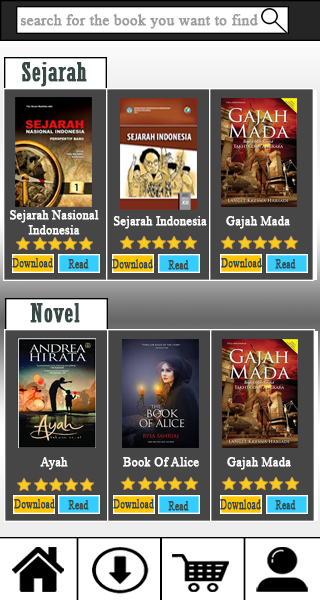
<style>
.page{position:relative;width:320px;height:600px;background:#464646}
.page>*{position:absolute;margin:0}
.t1{font:15.3px "TimesNewRomanPSMT";color:#9e9d9d;font-weight:bold}
.t2{font:26.3px "Rockwell-Condensed";color:#384844;font-weight:bold}
.t3{font:12.3px "TimesNewRomanPSMT";color:#fefefe;font-weight:bold}
.t4{font:11.6px "TimesNewRomanPSMT";color:#384844;font-weight:bold;scale:0.8 1}
.t5{font:12.8px "TimesNewRomanPSMT";color:#384844;font-weight:bold;scale:0.72 1}
.t6{font:13.4px "TimesNewRomanPSMT";color:#384844;font-weight:bold;scale:0.69 1}
.t7{font:11.9px "TimesNewRomanPSMT";color:#384844;font-weight:bold;scale:0.78 1}
.t8{font:13.7px "TimesNewRomanPSMT";color:#384844;font-weight:bold;scale:0.67 1}
</style>
<div class="page">
<p class="t1" style="left:20px;top:14px;width:238px;height:15px">search for the book you want to find</p>
<p class="t2" style="left:22px;top:62px;width:65px;height:25px">Sejarah</p>
<p class="t3" style="left:10px;top:210px;width:89px;height:25px;text-align:center">Sejarah Nasional<br>Indonesia</p>
<p class="t3" style="left:113px;top:216px;width:94px;height:13px">Sejarah Indonesia</p>
<p class="t3" style="left:226px;top:216px;width:64px;height:13px">Gajah Mada</p>
<p class="t4" style="left:12px;top:258px;width:41px;height:10px">Download</p>
<p class="t4" style="left:68px;top:259px;width:21px;height:10px">Read</p>
<p class="t5" style="left:112px;top:259px;width:41px;height:10px">Download</p>
<p class="t4" style="left:168px;top:260px;width:21px;height:10px">Read</p>
<p class="t6" style="left:221px;top:258px;width:41px;height:10px">Download</p>
<p class="t4" style="left:275px;top:259px;width:21px;height:10px">Read</p>
<p class="t2" style="left:30px;top:303px;width:50px;height:20px">Novel</p>
<p class="t3" style="left:40px;top:457px;width:28px;height:13px">Ayah</p>
<p class="t3" style="left:123px;top:457px;width:76px;height:10px">Book Of Alice</p>
<p class="t3" style="left:227px;top:457px;width:64px;height:13px">Gajah Mada</p>
<p class="t7" style="left:14px;top:499px;width:41px;height:10px">Download</p>
<p class="t4" style="left:68px;top:500px;width:21px;height:10px">Read</p>
<p class="t4" style="left:113px;top:499px;width:41px;height:10px">Download</p>
<p class="t4" style="left:168px;top:501px;width:21px;height:10px">Read</p>
<p class="t8" style="left:220px;top:499px;width:41px;height:11px">Download</p>
<p class="t4" style="left:275px;top:500px;width:21px;height:10px">Read</p>
</div>
